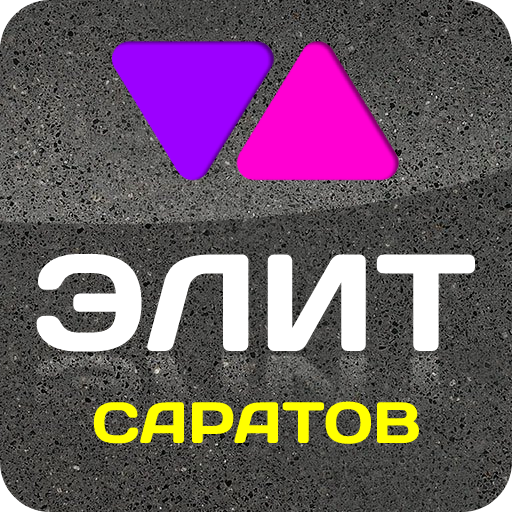
<style>
.page{position:relative;width:512px;height:512px}
.page>*{position:absolute;margin:0}
.t1{font:137.9px "DaysOne-Regular";color:#ffffff}
.t2{font:58px "DaysOne-Regular";color:#ffff00}
</style>
<div class="page">
<p class="t1" style="left:36px;top:254px;width:440px;height:98px">ЭЛИТ</p>
<p class="t2" style="left:93px;top:401px;width:326px;height:43px">САРАТОВ</p>
</div>
